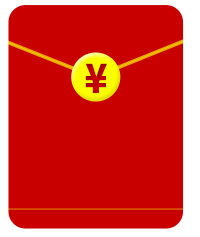
<style>
.page{position:relative;width:200px;height:237px;background:#c90000}
.page>*{position:absolute;margin:0}
.t1{font:42.3px "JZhongYi";color:#c90000;scale:0.96 1}
</style>
<div class="page">
<p class="t1" style="left:85px;top:63px;width:22px;height:30px">￥</p>
</div>
